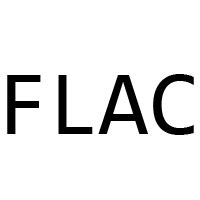
<style>
.page{position:relative;width:200px;height:200px;background:#ffffff}
.page>*{position:absolute;margin:0}
.t1{font:91.7px "Consolas";color:#000000}
</style>
<div class="page">
<p class="t1" style="left:7px;top:74px;width:187px;height:61px">FLAC</p>
</div>
